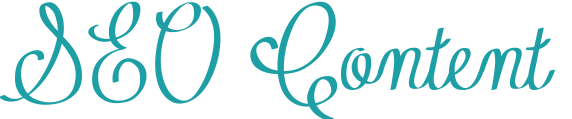
<style>
.page{position:relative;width:572px;height:119px;background:#ffffff}
.page>*{position:absolute;margin:0}
.t1{font:108.3px "Contribute_FREE-version";color:#1e9fa5}
</style>
<div class="page">
<p class="t1" style="left:0px;top:1px;width:555px;height:120px">SEO Content</p>
</div>
